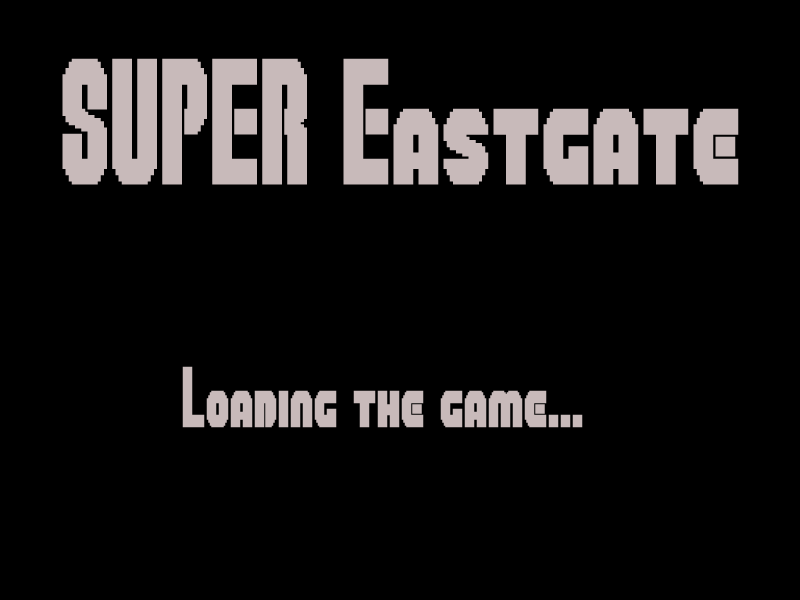
<style>
.page{position:relative;width:800px;height:600px;background:#000000}
.page>*{position:absolute;margin:0}
.t1{font:125px "SuperPlumberBrothers";color:#c8baba}
.t2{font:60px "SuperPlumberBrothers";color:#c8baba}
</style>
<div class="page">
<p class="t1" style="left:62px;top:58px;width:677px;height:127px">SUPER Eastgate</p>
<p class="t2" style="left:182px;top:366px;width:401px;height:62px">Loading the game...</p>
</div>
